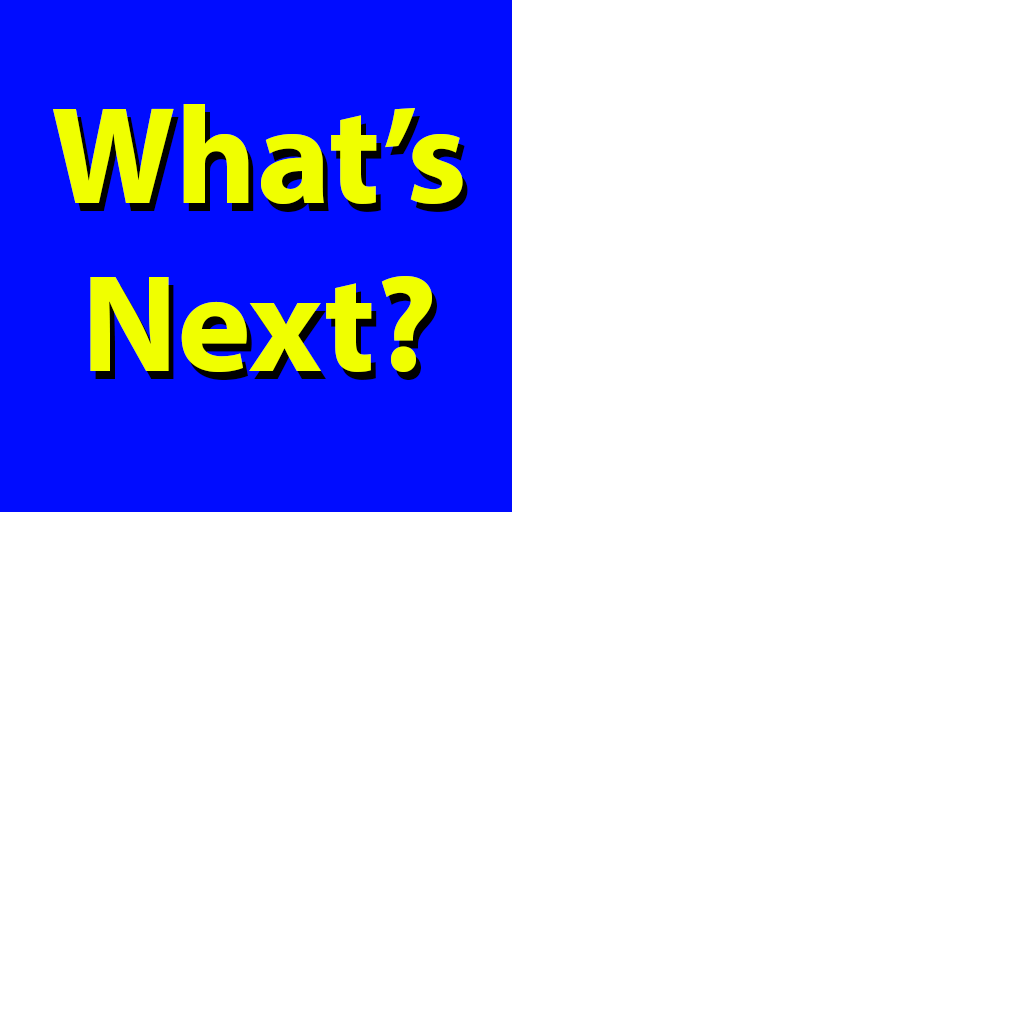
<style>
.page{position:relative;width:1024px;height:1020px;background:#ffffff}
.page>*{position:absolute;margin:0}
.t1{font:140px "MyriadPro-Bold";color:#f0ff00}
.t2{font:140px "MyriadPro-Bold"}
</style>
<div class="page">
<p class="t1" style="left:53px;top:104px;width:410px;height:268px;text-align:center">What’s Next?</p>
<p class="t2" style="left:58px;top:112px;width:410px;height:268px;text-align:center">What’s Next?</p>
</div>
